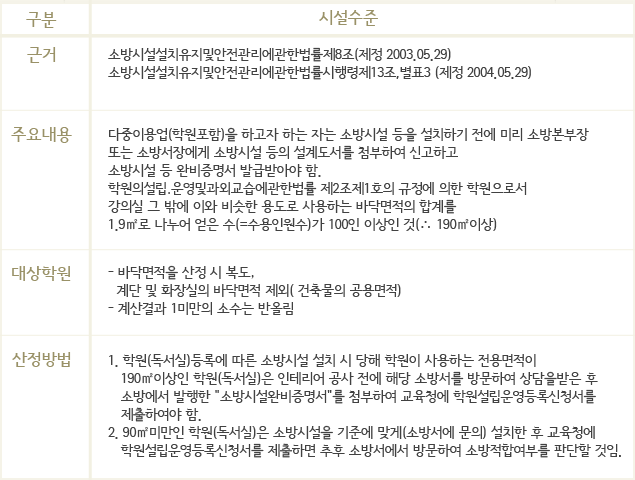
<style>
.page{position:relative;width:635px;height:480px;background:#ffffff}
.page>*{position:absolute;margin:0}
.t1{font:17.4px "SeoulNamsanB";letter-spacing:-0.025em;color:#999167}
.t2{font:14px/18px "SeoulNamsanM";letter-spacing:-0.025em;color:#414141}
.t3{font:14px/18px "Gulim";letter-spacing:-0.025em;color:#414141}
</style>
<div class="page">
<p class="t1" style="left:26px;top:12px;width:31px;height:16px">구분</p>
<p class="t1" style="left:319px;top:10px;width:59px;height:16px">시설수준</p>
<p class="t1" style="left:27px;top:47px;width:29px;height:16px">근거</p>
<p class="t2" style="left:108px;top:47px;width:423px;height:33px">소방시설설치유지및안전관리에관한법률제8조(제정 2003.05.29) <br>소방시설설치유지및안전관리에관한법률시행령제13조,별표3 (제정 2004.05.29)</p>
<p class="t1" style="left:11px;top:127px;width:61px;height:16px">주요내용</p>
<p class="t2" style="left:108px;top:127px;width:481px;height:104px">다중이용업(학원포함)을 하고자 하는 자는 소방시설 등을 설치하기 전에 미리 소방본부장<br>또는 소방서장에게 소방시설 등의 설계도서를 첨부하여 신고하고<br>소방시설 등 완비증명서 발급받아야 함.<br>학원의설립<span class="t3">.</span>운영및과외교습에관한법률 제2조제1호의 규정에 의한 학원으로서<br>강의실 그 밖에 이와 비슷한 용도로 사용하는 바닥면적의 합계를<br>1.9㎡로 나누어 얻은 수(=수용인원수)가 100인 이상인 것(∴ 190㎡이상)</p>
<p class="t1" style="left:12px;top:266px;width:59px;height:15px">대상학원</p>
<p class="t2" style="left:108px;top:265px;width:293px;height:50px">- 바닥면적을 산정 시 복도<span class="t3">, <br></span>  계단 및 화장실의 바닥면적 제외( 건축물의 공용면적)<br>- 계산결과 1미만의 소수는 반올림</p>
<p class="t1" style="left:12px;top:352px;width:59px;height:15px">산정방법</p>
<p class="t2" style="left:108px;top:354px;width:513px;height:104px">1. 학원(독서실)등록에 따른 소방시설 설치 시 당해 학원이 사용하는 전용면적이<br>   190㎡이상인 학원(독서실)은 인테리어 공사 전에 해당 소방서를 방문하여 상담을받은 후<br>   소방에서 발행한 "소방시설완비증명서"를 첨부하여 교육청에 학원설립운영등록신청서를<br>   제출하여야 함. <br>2. 90㎡미만인 학원(독서실)은 소방시설을 기준에 맞게(소방서에 문의) 설치한 후 교육청에<br>   학원설립운영등록신청서를 제출하면 추후 소방서에서 방문하여 소방적합여부를 판단할 것임.</p>
</div>
